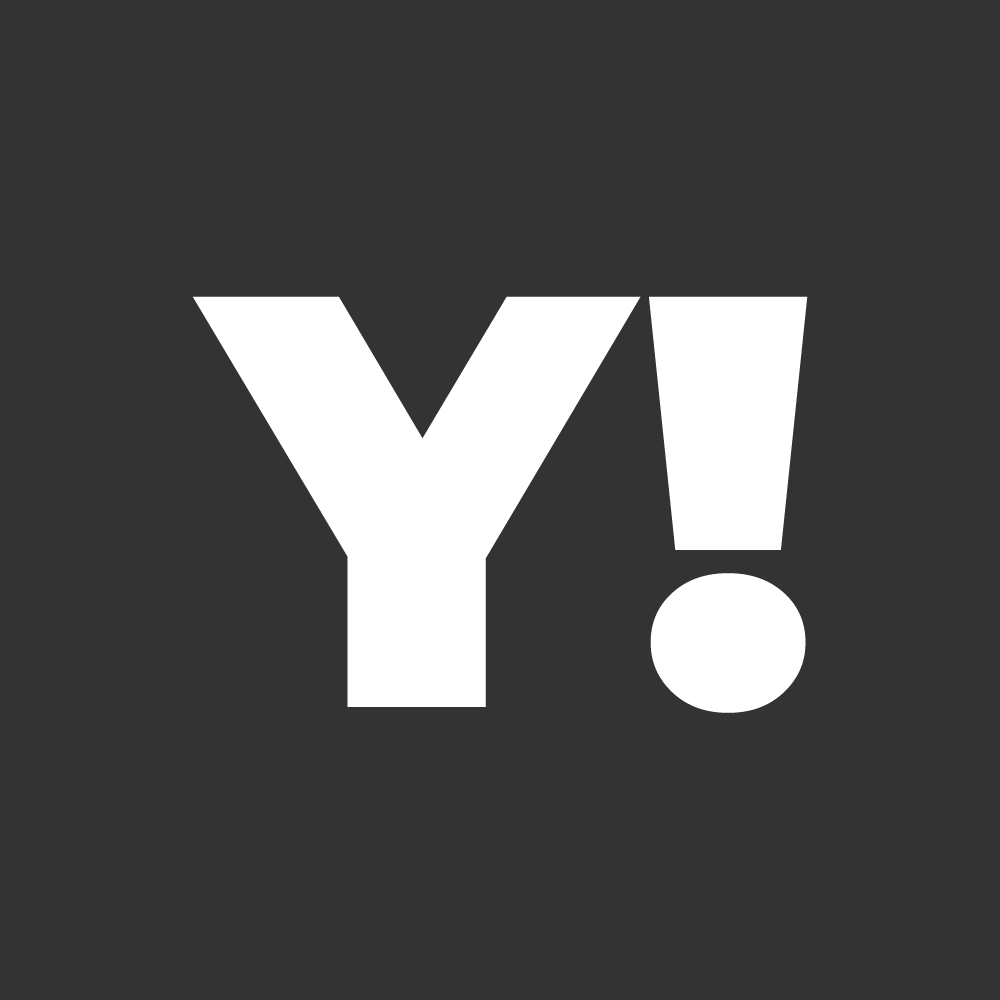
<style>
.page{position:relative;width:1000px;height:1000px;background:#333333}
.page>*{position:absolute;margin:0}
.t1{font:585.7px "Montserrat-Black";color:#ffffff}
</style>
<div class="page">
<p class="t1" style="left:192px;top:296px;width:616px;height:417px">Y!</p>
</div>
